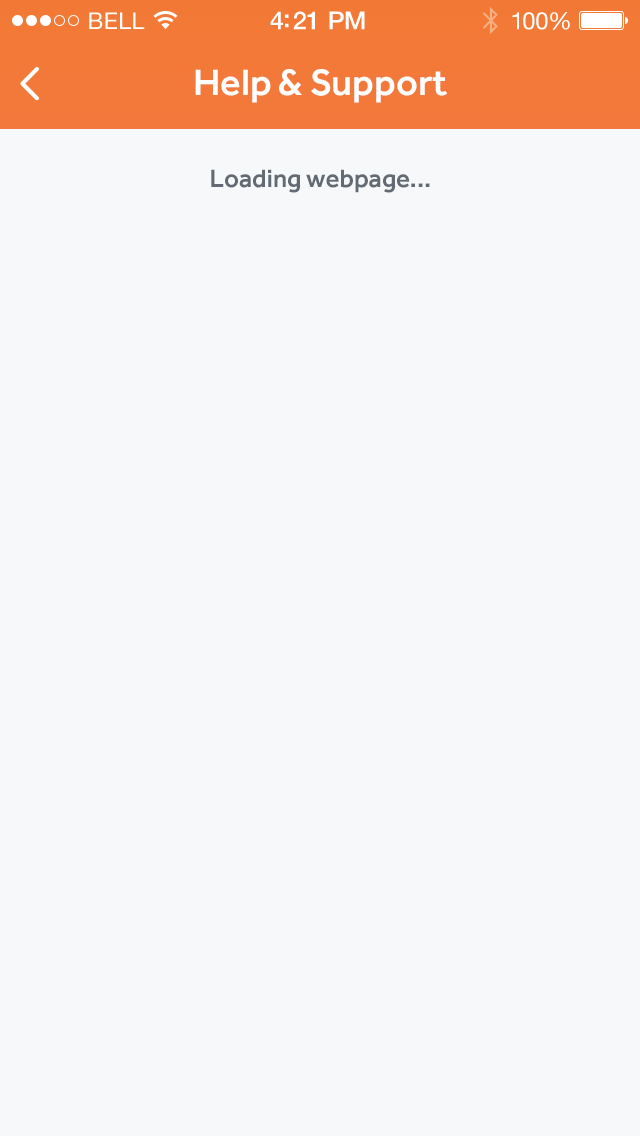
<style>
.page{position:relative;width:640px;height:1136px;background:#f6f8fa}
.page>*{position:absolute;margin:0}
.t1{font:23px "HelveticaNeue";letter-spacing:0.02em;color:#ffffff}
.t2{font:25px "HelveticaNeue-Medium";letter-spacing:-0.02em;color:#ffffff}
.t3{font:24px "HelveticaNeue";letter-spacing:-0.02em;color:#ffffff}
.t4{font:38px "Effra-Medium";color:#ffffff}
.t5{font:26px "Effra-Medium";color:#626a73}
</style>
<div class="page">
<p class="t1" style="left:89px;top:12px;width:56px;height:17px">BELL</p>
<p class="t2" style="left:270px;top:11px;width:95px;height:19px">4:21 PM</p>
<p class="t3" style="left:512px;top:12px;width:58px;height:18px">100%</p>
<p class="t4" style="left:195px;top:69px;width:252px;height:34px">Help &amp; Support</p>
<p class="t5" style="left:211px;top:169px;width:219px;height:24px">Loading webpage...</p>
</div>
